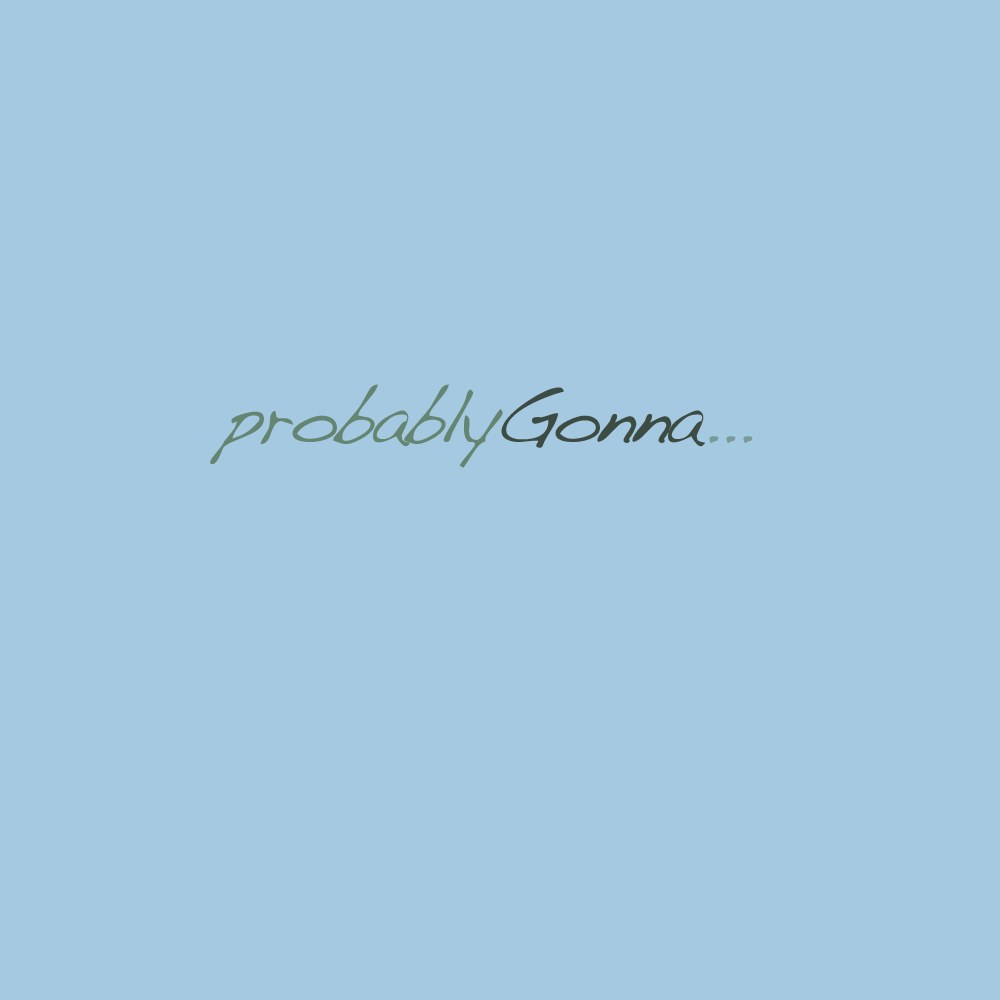
<style>
.page{position:relative;width:1000px;height:1000px;background:#a6c9e2}
.page>*{position:absolute;margin:0}
.t1{font:75px "Handwriting-Dakota";letter-spacing:-0.05em;color:#648572}
.t2{font:75px "Handwriting-Dakota";letter-spacing:-0.05em;color:#3c4c43}
.t3{font:75px "Handwriting-Dakota";letter-spacing:-0.05em;color:#7a9b98}
</style>
<div class="page">
<p class="t1" style="left:210px;top:384px;width:543px;height:84px">probably<span class="t2">Gonna</span><span class="t3">...</span></p>
</div>
